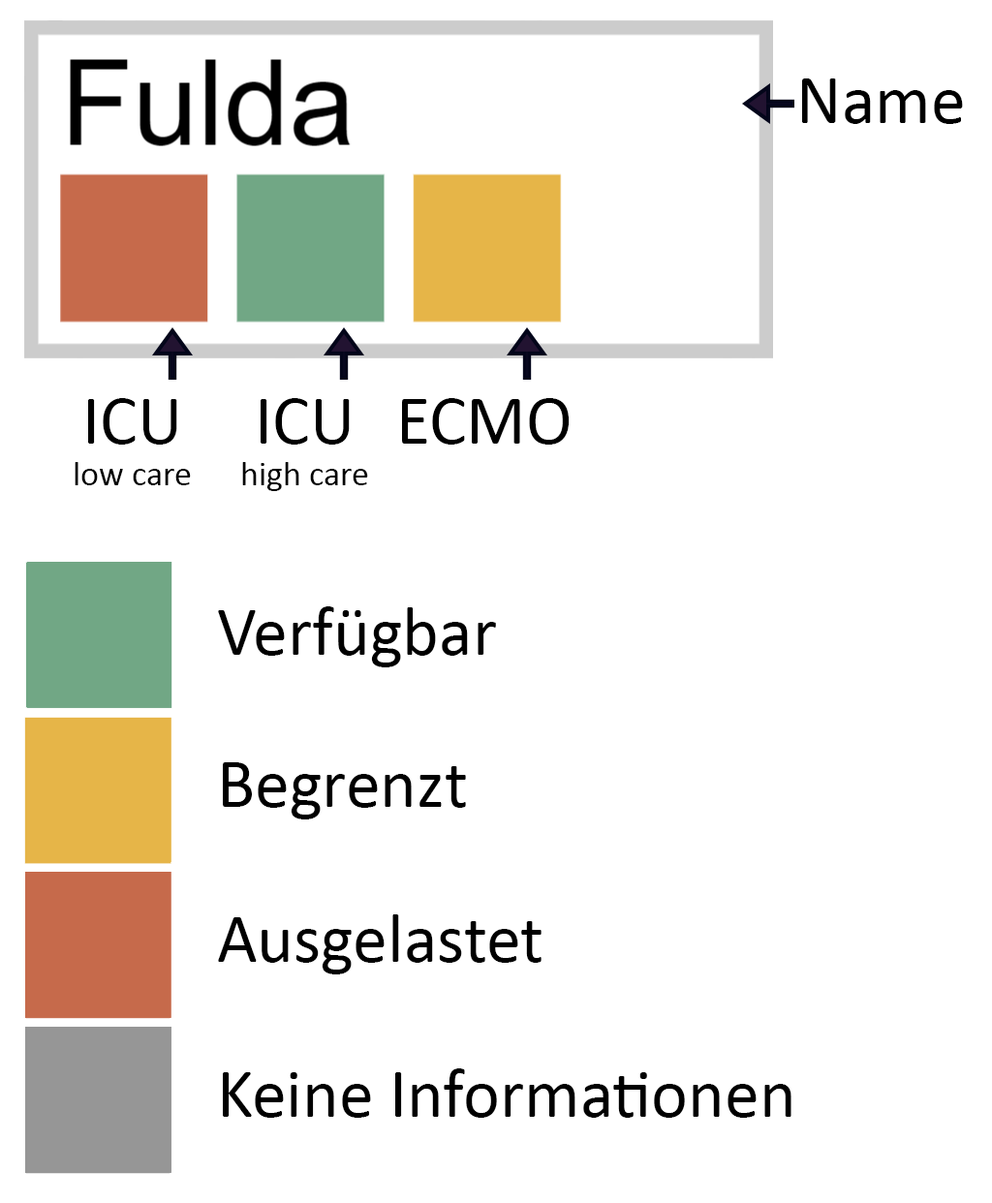
<style>
.page{position:relative;width:992px;height:1203px;background:#ffffff}
.page>*{position:absolute;margin:0}
.t1{font:69.7px "Calibri";color:#000000}
.t2{font:34.9px "Calibri";color:#000000}
</style>
<div class="page">
<p class="t1" style="left:802px;top:78px;width:160px;height:46px">Name</p>
<p class="t2" style="left:75px;top:398px;width:116px;height:87px;text-align:center"><span class="t1">ICU<br></span>low care</p>
<p class="t2" style="left:242px;top:398px;width:126px;height:93px;text-align:center"><span class="t1">ICU<br></span>high care</p>
<p class="t1" style="left:402px;top:398px;width:167px;height:46px">ECMO</p>
<p class="t1" style="left:218px;top:606px;width:278px;height:61px">Verfügbar</p>
<p class="t1" style="left:223px;top:762px;width:243px;height:57px">Begrenzt</p>
<p class="t1" style="left:218px;top:914px;width:323px;height:60px">Ausgelastet</p>
<p class="t1" style="left:223px;top:1068px;width:568px;height:49px">Keine Informationen</p>
</div>
